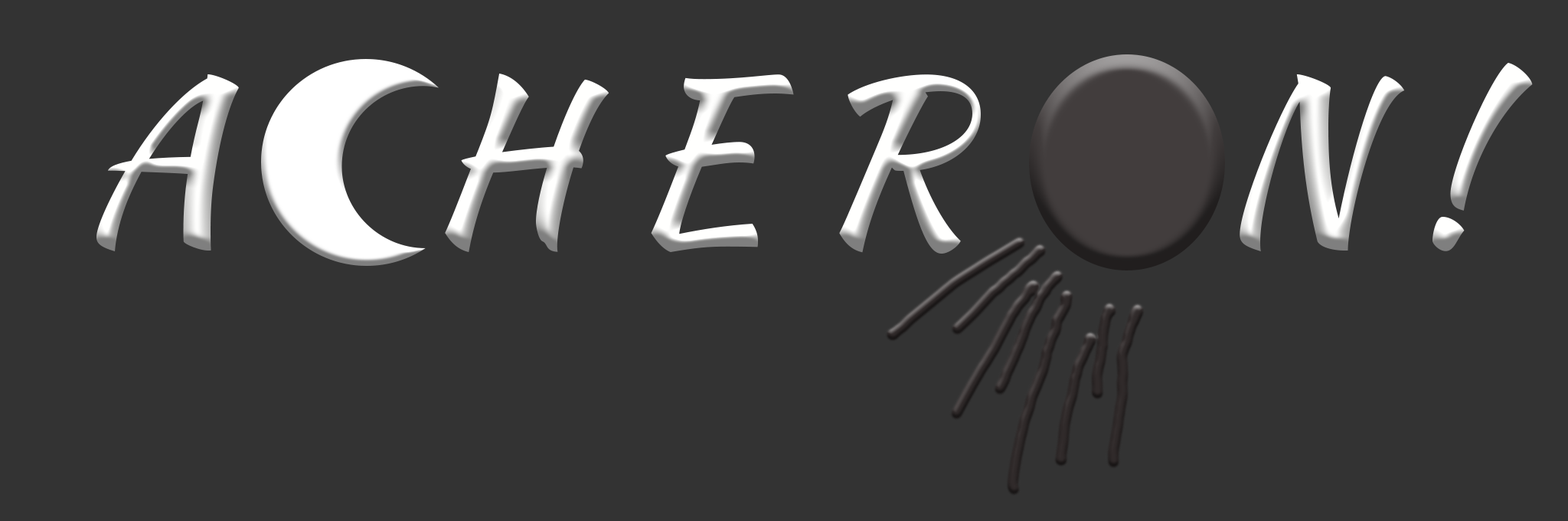
<style>
.page{position:relative;width:1568px;height:521px;background:#333333}
.page>*{position:absolute;margin:0}
.t1{font:216.9px "KaushanScript-Regular"}
</style>
<div class="page">
<p class="t1" style="left:96px;top:63px;width:1437px;height:190px">A    H E R     N !</p>
</div>
